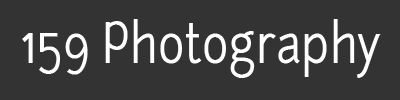
<style>
.page{position:relative;width:400px;height:100px;background:#333333}
.page>*{position:absolute;margin:0}
.t1{font:53.5px "Junction-Regular";color:#ffffff;scale:0.85 1}
</style>
<div class="page">
<p class="t1" style="left:22px;top:19px;width:359px;height:59px">159 Photography</p>
</div>
